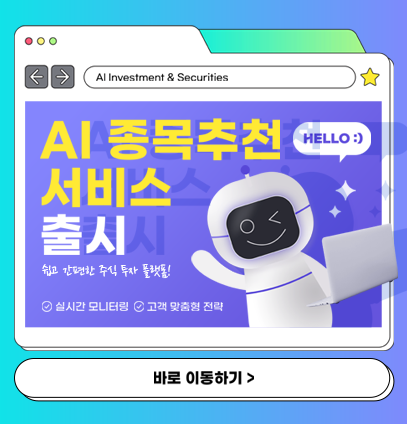
<style>
.page{position:relative;width:407px;height:424px;background:#ffffff}
.page>*{position:absolute;margin:0}
.t1{font:9.3px "GmarketSansMedium";color:#000000}
.t2{font:46.2px/48px "GmarketSansBold";color:#ffea34}
.t3{font:46.2px/48px "GmarketSansBold";color:#ffffff}
.t4{font:15.7px "NanumPen";color:#ffffff}
.t5{font:10.6px "GmarketSansMedium";letter-spacing:-0.01em;color:#ffffff}
.t6{font:14.9px "GmarketSansBold";color:#000000}
</style>
<div class="page">
<p class="t1" style="left:96px;top:73px;width:132px;height:8px">AI Investment &amp; Securities</p>
<p class="t2" style="left:40px;top:118px;width:240px;height:137px">AI 종목추천<br>서비스<br><span class="t3">출시</span></p>
<p class="t4" style="left:42px;top:264px;width:129px;height:15px">쉽고 간편한 주식 투자 플랫폼!</p>
<p class="t5" style="left:56px;top:302px;width:72px;height:9px">실시간 모니터링</p>
<p class="t5" style="left:147px;top:302px;width:76px;height:9px">고객 맞춤형 전략</p>
<p class="t6" style="left:154px;top:371px;width:100px;height:14px">바로 이동하기 &gt;</p>
</div>
